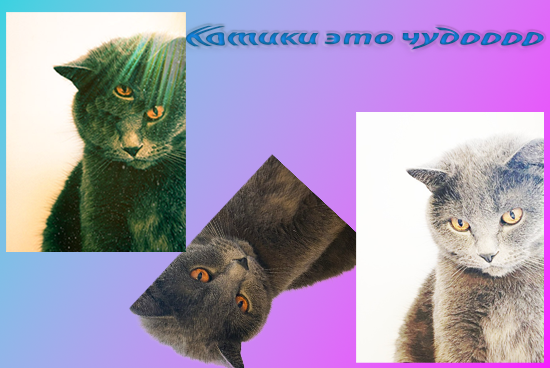
<style>
.page{position:relative;width:550px;height:368px}
.page>*{position:absolute;margin:0}
.t1{font:30px "MyriadPro-BoldIt"}
</style>
<div class="page">
<p class="t1" style="left:186px;top:25px;width:358px;height:25px">Котики это чудоооо</p>
</div>
